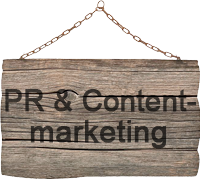
<style>
.page{position:relative;width:200px;height:179px;background:#ffffff}
.page>*{position:absolute;margin:0}
.t1{font:30px "ArialMT";color:#332e29;font-weight:bold;scale:0.95 1}
.t2{font:30px "ArialMT";color:#2c2925;font-weight:bold}
</style>
<div class="page">
<p class="t1" style="left:5px;top:89px;width:191px;height:23px">PR &amp; Content-</p>
<p class="t2" style="left:30px;top:120px;width:137px;height:29px">marketing</p>
</div>
